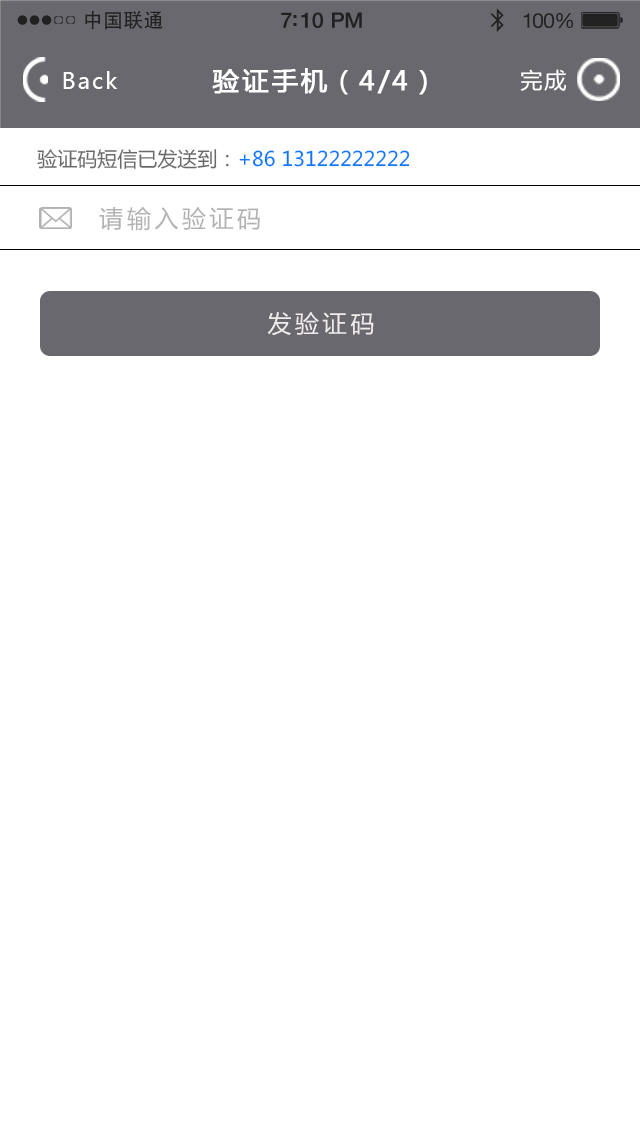
<style>
.page{position:relative;width:640px;height:1136px;background:#ffffff}
.page>*{position:absolute;margin:0}
.t1{font:19.7px "AdobeHeitiStd-Regular";letter-spacing:0.02em;color:#212121}
.t2{font:21.4px "HelveticaNeue-Medium";letter-spacing:-0.02em;color:#212121}
.t3{font:20.6px "HelveticaNeue";letter-spacing:-0.02em;color:#212121}
.t4{font:22px "MicrosoftYaHei";letter-spacing:0.1em;color:#ffffff}
.t5{font:26px "MicrosoftYaHei";letter-spacing:0.1em;color:#ffffff;font-weight:bold}
.t6{font:20px "MicrosoftYaHei";color:#0c79ff}
.t7{font:20px "MicrosoftYaHei";color:#6a6a6a}
.t8{font:24px "MicrosoftYaHei";letter-spacing:0.15em;color:#b2b2b2}
.t9{font:24px "MicrosoftYaHei";letter-spacing:0.15em;color:#f0ecec}
</style>
<div class="page">
<p class="t1" style="left:85px;top:10px;width:78px;height:20px">中国联通</p>
<p class="t2" style="left:281px;top:12px;width:81px;height:16px">7:10 PM</p>
<p class="t3" style="left:523px;top:13px;width:50px;height:16px">100%</p>
<p class="t4" style="left:63px;top:71px;width:55px;height:18px">Back</p>
<p class="t5" style="left:212px;top:68px;width:215px;height:27px">验证手机（4/4）</p>
<p class="t4" style="left:520px;top:69px;width:46px;height:22px">完成</p>
<p class="t6" style="left:37px;top:149px;width:373px;height:20px"><span class="t7">验证码短信已发送到：</span>+86 13122222222</p>
<p class="t8" style="left:99px;top:207px;width:161px;height:24px">请输入验证码</p>
<p class="t9" style="left:267px;top:312px;width:107px;height:24px">发验证码</p>
</div>
